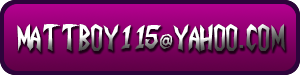
<style>
.page{position:relative;width:300px;height:75px}
.page>*{position:absolute;margin:0}
.t1{font:60px "INVADER"}
.t2{font:72px "INVADER"}
.t3{font:60px "Latha"}
</style>
<div class="page">
<p class="t1" style="left:17px;top:24px;width:268px;height:28px">mattboy<span class="t2">115</span>@yahoo<span class="t3">.</span>com</p>
</div>
